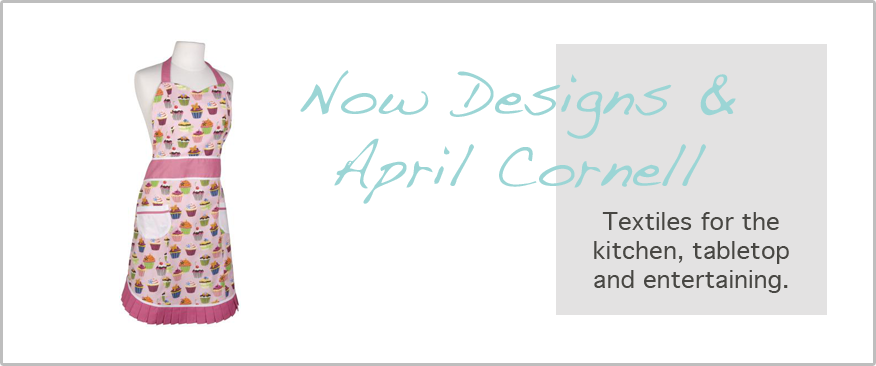
<style>
.page{position:relative;width:876px;height:366px;background:#ffffff}
.page>*{position:absolute;margin:0}
.t1{font:60px "Handwriting-Dakota";color:#9bd5d5}
.t2{font:24px "Geneva";color:#484743}
</style>
<div class="page">
<p class="t1" style="left:300px;top:70px;width:436px;height:134px;text-align:center">Now Designs &amp;<br>April Cornell<br>joejkj</p>
<p class="t2" style="left:594px;top:212px;width:195px;height:81px;text-align:center">Textiles for the kitchen, tabletop <br>and entertaining.</p>
</div>
